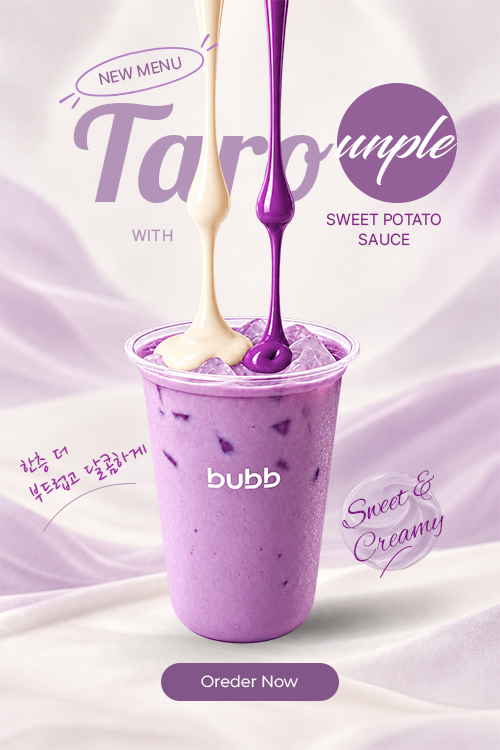
<style>
.page{position:relative;width:500px;height:750px}
.page>*{position:absolute;margin:0}
.t1{font:16px "Pretendard-Regular";color:#946198}
.t2{font:132px "Lobster-Regular";color:#b393b7;scale:1.06 1}
.t3{font:58px "Blacksword";color:#ffffff}
.t4{font:16px/20px "Pretendard-Regular";color:#87268b}
.t5{font:16px "Pretendard-Regular";letter-spacing:0.02em;color:#b292b5}
.t6{font:26px/28px "NanumPen-Regular";color:#a52ea7}
.t7{font:35px "AlexBrush-Regular";color:#831685}
.t8{font:16px "Montserrat-Regular";color:#ffffff}
</style>
<div class="page">
<p class="t1" style="left:98px;top:56px;width:84px;height:29px;rotate:-12deg">NEW MENU</p>
<p class="t2" style="left:73px;top:103px;width:261px;height:100px">Taro</p>
<p class="t3" style="left:334px;top:115px;width:124px;height:70px">unple</p>
<p class="t4" style="left:326px;top:213px;width:115px;height:33px;text-align:center">SWEET POTATO<br>SAUCE</p>
<p class="t5" style="left:132px;top:229px;width:41px;height:13px">WITH</p>
<p class="t6" style="left:20px;top:444px;width:127px;height:59px;rotate:-22deg">한층 더<br>부드럽고 달콤하게</p>
<p class="t7" style="left:342px;top:470px;width:92px;height:59px;rotate:-23deg">Sweet &amp;</p>
<p class="t7" style="left:354px;top:515px;width:90px;height:47px;rotate:-23deg">Creamy</p>
<p class="t8" style="left:201px;top:675px;width:97px;height:13px">Oreder Now</p>
</div>
